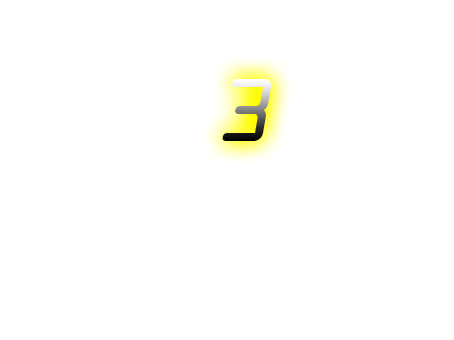
<style>
.page{position:relative;width:454px;height:340px;background:#ffffff}
.page>*{position:absolute;margin:0}
.t1{font:80px "OCRAStd";font-style:italic}
</style>
<div class="page">
<p class="t1" style="left:222px;top:79px;width:50px;height:62px">3</p>
</div>
